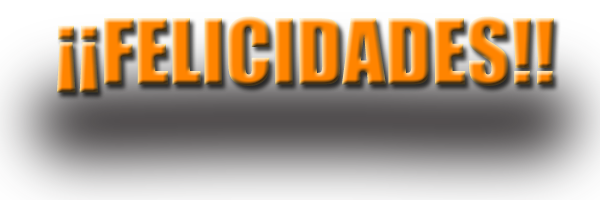
<style>
.page{position:relative;width:600px;height:200px}
.page>*{position:absolute;margin:0}
.t1{font:84px "Impact"}
</style>
<div class="page">
<p class="t1" style="left:57px;top:16px;width:497px;height:77px">¡¡FELICIDADES!!</p>
</div>
